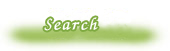
<style>
.page{position:relative;width:170px;height:51px;background:#ffffff}
.page>*{position:absolute;margin:0}
.t1{font:18px "SingkaiEG-Bold-GB";color:#ffffff}
</style>
<div class="page">
<p class="t1" style="left:44px;top:17px;width:54px;height:14px">Search</p>
</div>
